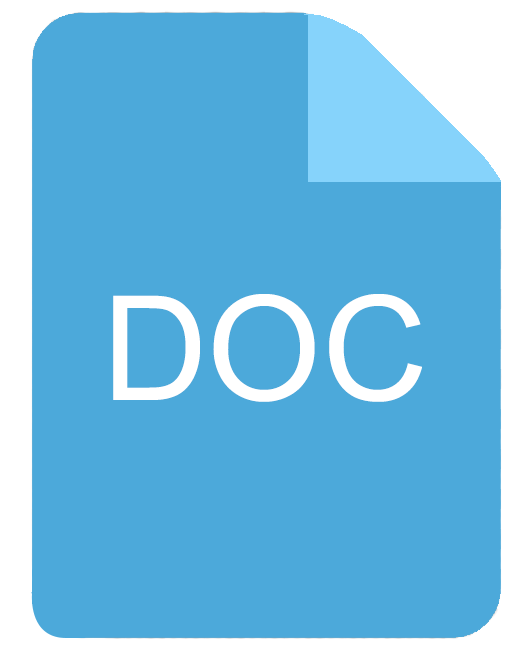
<style>
.page{position:relative;width:528px;height:661px;background:#4ca9da}
.page>*{position:absolute;margin:0}
.t1{font:145.4px "ArialMT";color:#ffffff}
</style>
<div class="page">
<p class="t1" style="left:113px;top:294px;width:309px;height:108px">DOC</p>
</div>
